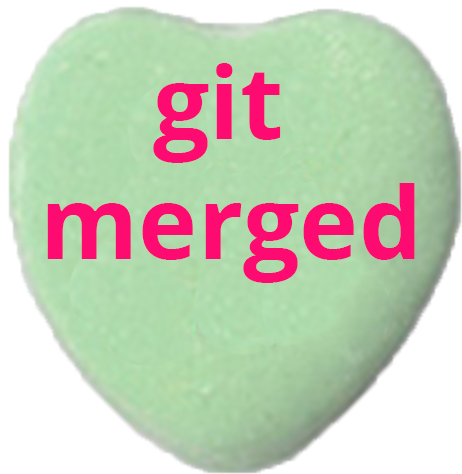
<style>
.page{position:relative;width:462px;height:474px;background:#ffffff}
.page>*{position:absolute;margin:0}
.t1{font:100px "OpenSans-Bold";color:#fe0b72}
</style>
<div class="page">
<p class="t1" style="left:47px;top:63px;width:368px;height:220px;text-align:center">git <br>merged</p>
</div>
